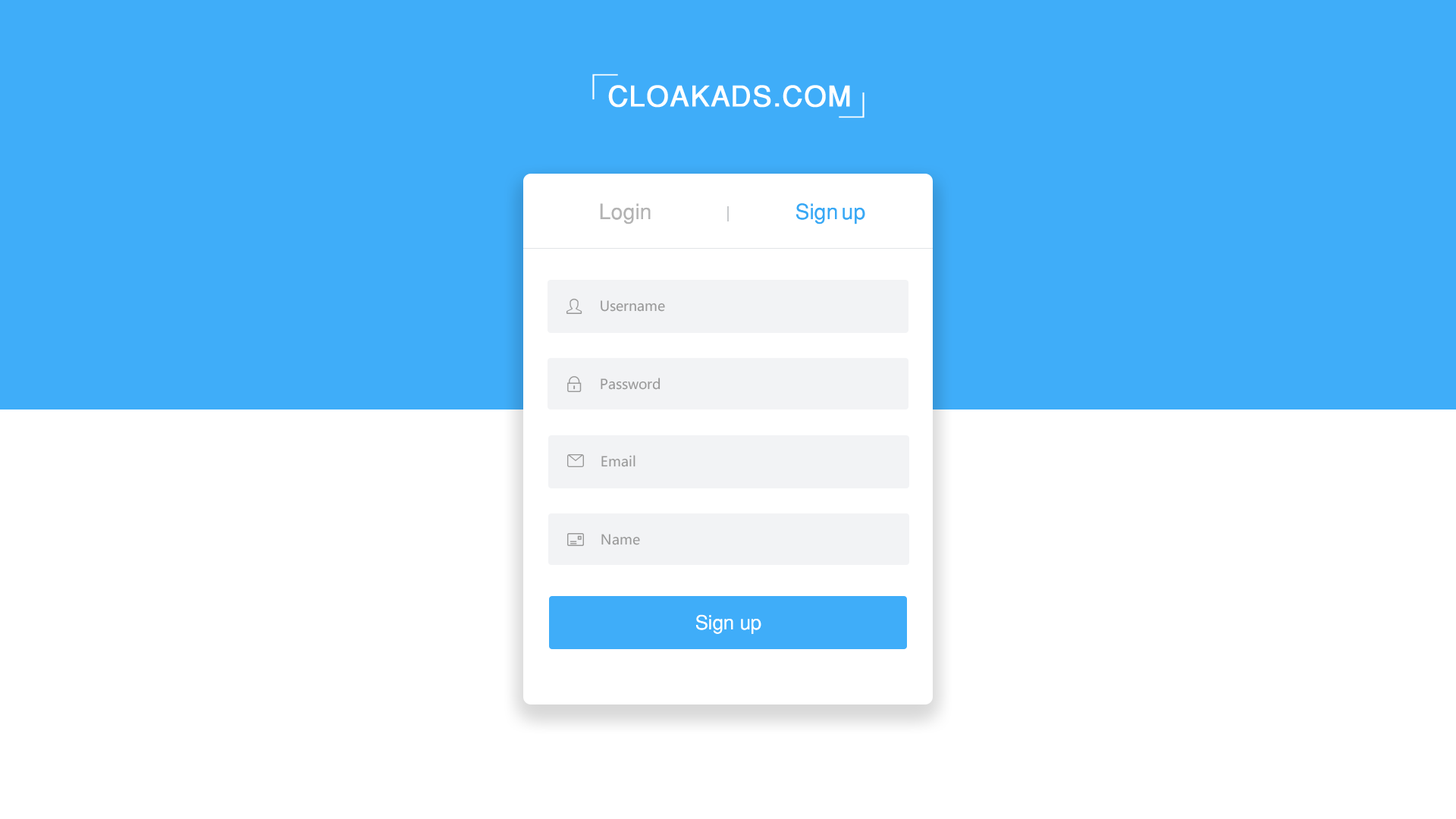
<style>
.page{position:relative;width:1456px;height:819px;background:#ffffff}
.page>*{position:absolute;margin:0}
.t1{font:28.5px "SansSerif";letter-spacing:0.02em;color:#ffffff;font-weight:bold}
.t2{font:21.2px "SansSerif";color:#b3b3b3}
.t3{font:21.2px "SansSerif";color:#38a8f5}
.t4{font:13.7px "MicrosoftYaHei";color:#999999}
.t5{font:13.7px "MicrosoftYaHei";color:#999999;text-transform:uppercase}
.t6{font:19.7px "SansSerif";color:#ffffff}
</style>
<div class="page">
<p class="t1" style="left:608px;top:85px;width:242px;height:23px">CLOAKADS.COM</p>
<p class="t2" style="left:600px;top:203px;width:51px;height:21px">Login</p>
<p class="t3" style="left:796px;top:203px;width:69px;height:21px">Sign up</p>
<p class="t4" style="left:601px;top:300px;width:64px;height:12px"><span class="t5">U</span>sername</p>
<p class="t4" style="left:601px;top:378px;width:59px;height:12px">Password</p>
<p class="t4" style="left:601px;top:455px;width:34px;height:12px"><span class="t5">E</span>mail</p>
<p class="t4" style="left:601px;top:534px;width:39px;height:11px">Name</p>
<p class="t6" style="left:695px;top:614px;width:66px;height:20px">Sign  up</p>
</div>
